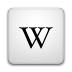
<style>
.page{position:relative;width:72px;height:72px;background:#ffffff}
.page>*{position:absolute;margin:0}
.t1{font:30px "HoeflerText";color:#000000}
</style>
<div class="page">
<p class="t1" style="left:19px;top:27px;width:34px;height:22px">W</p>
</div>
